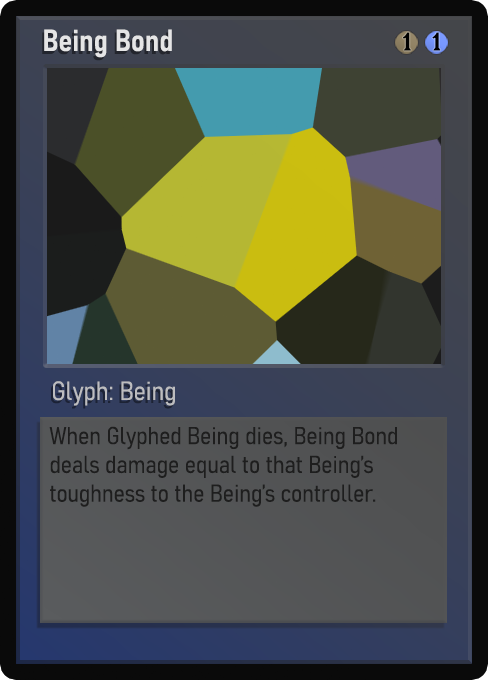
<style>
.page{position:relative;width:488px;height:680px}
.page>*{position:absolute;margin:0}
.t1{font:30px "Bahnschrift-SemiBoldSemiCondensed";color:#f2f2f2;font-weight:bold}
.t2{font:25px "WTRRoycroft";color:#000000;font-weight:bold;scale:1.09 1}
.t3{font:26px "Bahnschrift-LightSemiCondensed";color:#c8c8c8;font-weight:bold}
.t4{font:24px "Bahnschrift-LightSemiCondensed";color:#1e1e1e;font-weight:bold}
</style>
<div class="page">
<p class="t1" style="left:44px;top:29px;width:128px;height:29px;opacity:0.9">Being Bond</p>
<p class="t2" style="left:403px;top:32px;width:8px;height:19px">1</p>
<p class="t2" style="left:432px;top:32px;width:9px;height:19px">1</p>
<p class="t3" style="left:53px;top:381px;width:122px;height:25px;opacity:0.9">Glyph: Being</p>
<p class="t4" style="left:49px;top:426px;width:348px;height:81px">When Glyphed Being dies, Being Bond deals damage equal to that Being’s toughness to the Being’s controller.</p>
</div>
